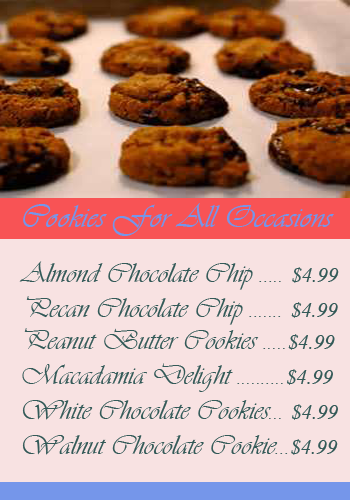
<style>
.page{position:relative;width:350px;height:500px;background:#f8e2e2}
.page>*{position:absolute;margin:0}
.t1{font:33.3px "Vivaldii";color:#7596ea}
.t2{font:29.2px "Vivaldii";color:#335a58}
.t3{font:20.8px "TimesNewRomanPS-ItalicMT";color:#335a58}
</style>
<div class="page">
<p class="t1" style="left:23px;top:203px;width:311px;height:33px">Cookies For All Occasions</p>
<p class="t2" style="left:19px;top:261px;width:320px;height:64px">Almond Chocolate Chip ..... <span class="t3">$4.99 <br></span>Pecan Chocolate Chip ....... <span class="t3">$4.99</span></p>
<p class="t2" style="left:22px;top:328px;width:316px;height:127px">Peanut Butter Cookies .....<span class="t3">$4.99<br></span>Macadamia Delight ..........<span class="t3">$4.99<br></span>White Chocolate Cookies... <span class="t3">$4.99<br></span>Walnut Chocolate Cookie...<span class="t3">$4.99</span></p>
</div>
